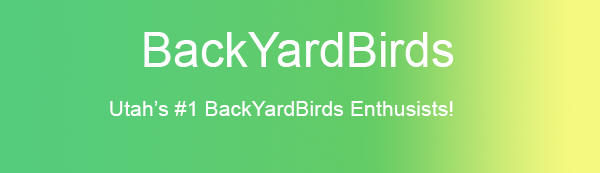
<style>
.page{position:relative;width:600px;height:173px}
.page>*{position:absolute;margin:0}
.t1{font:48px "ArialMT";color:#ffffff}
.t2{font:21.3px "ArialMT";color:#ffffff}
</style>
<div class="page">
<p class="t1" style="left:144px;top:32px;width:310px;height:35px">BackYardBirds</p>
<p class="t2" style="left:110px;top:101px;width:343px;height:15px">Utah’s #1 BackYardBirds Enthusists!</p>
</div>
